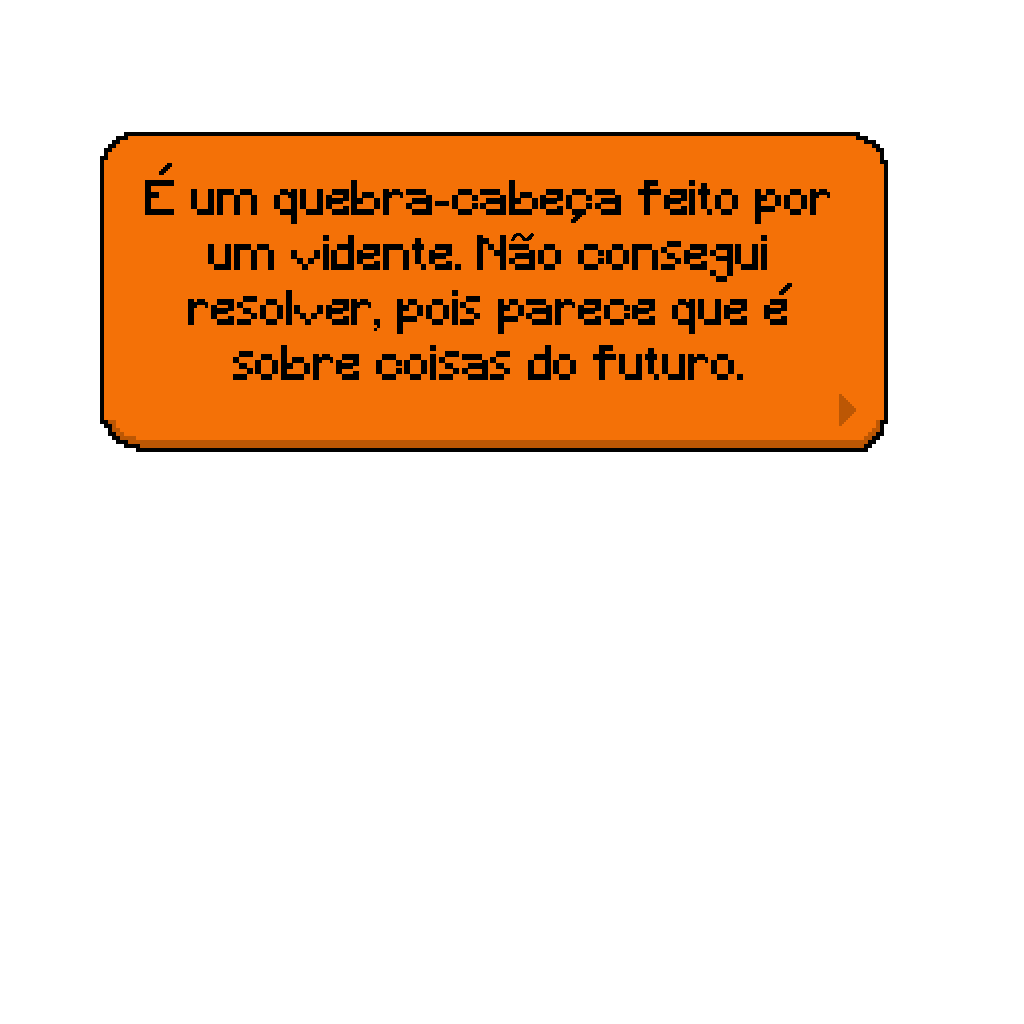
<style>
.page{position:relative;width:1024px;height:1024px;background:#ffffff}
.page>*{position:absolute;margin:0}
.t1{font:45.8px "Minecraft";color:#000000}
</style>
<div class="page">
<p class="t1" style="left:145px;top:180px;width:685px;height:200px;text-align:center">E um quebra-cabeca feito por um vidente. Nao consegui resolver, pois parece que e sobre coisas do futuro.</p>
</div>
